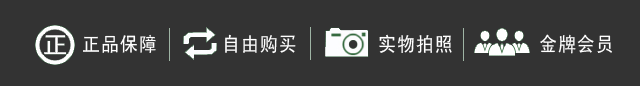
<style>
.page{position:relative;width:640px;height:86px;background:#333333}
.page>*{position:absolute;margin:0}
.t1{font:20px "SimHei";letter-spacing:0.05em;color:#ffffff;scale:0.9 1}
</style>
<div class="page">
<p class="t1" style="left:83px;top:34px;width:73px;height:19px">正品保障</p>
<p class="t1" style="left:225px;top:34px;width:71px;height:20px">自由购买</p>
<p class="t1" style="left:379px;top:34px;width:73px;height:19px">实物拍照</p>
<p class="t1" style="left:540px;top:34px;width:72px;height:20px">金牌会员</p>
</div>
